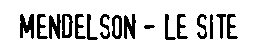
<style>
.page{position:relative;width:261px;height:50px;background:#ffffff}
.page>*{position:absolute;margin:0}
.t1{font:25.4px "TopSecretRegularSWFTE";color:#000000}
</style>
<div class="page">
<p class="t1" style="left:20px;top:14px;width:218px;height:26px">MENDELSON - LE SITE</p>
</div>
